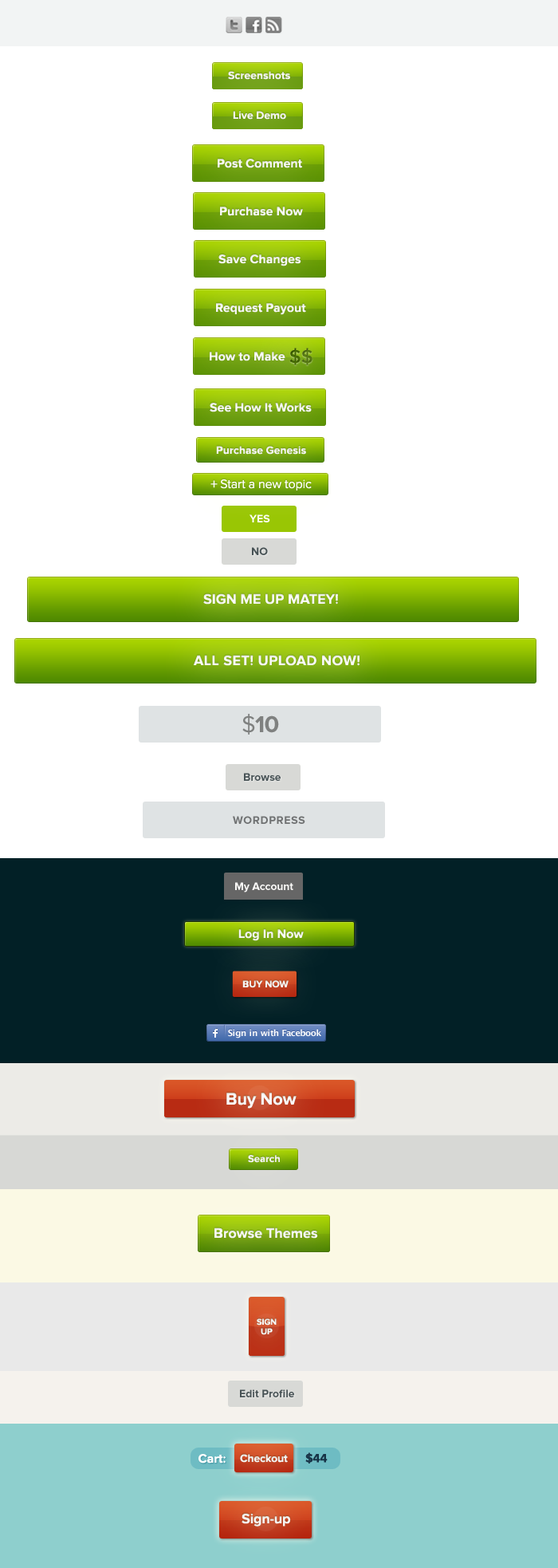
<style>
.page{position:relative;width:558px;height:1568px;background:#ffffff}
.page>*{position:absolute;margin:0}
.t1{font:11.2px "ProximaNova-Bold";color:#ffffff}
.t2{font:12.8px "ProximaNova-Bold";color:#ffffff}
.t3{font:19.1px "ProximaNova-Semibold";color:#446902}
.t4{font:19.1px "ProximaNova-Semibold";color:#547612}
.t5{font:11.2px "ProximaNova-Bold";color:#475255}
.t6{font:14.4px "ProximaNova-Bold";color:#ffffff}
.t7{font:14.4px "ProximaNova-Bold";letter-spacing:0.025em;color:#ffffff}
.t8{font:23.9px "ProximaNova-Bold";letter-spacing:-0.025em;color:#7f8180}
.t9{font:23.9px "ProximaNova-Regular";letter-spacing:-0.025em;color:#7f8180}
.t10{font:11.2px "ProximaNova-Bold";letter-spacing:0.05em;color:#6f7172}
.t11{font:11.2px "ProximaNova-Bold";letter-spacing:-0.01em;color:#fcfbf9}
.t12{font:9.9px "ProximaNova-Bold";letter-spacing:-0.01em;color:#ffffff}
.t13{font:17.5px "ProximaNova-Bold";letter-spacing:-0.01em;color:#ffffff}
.t14{font:10.4px "ProximaNova-Bold";color:#ffffff}
.t15{font:8.8px "ProximaNova-Bold";letter-spacing:-0.01em;color:#ffffff}
.t16{font:11.2px "ProximaNova-Bold";letter-spacing:-0.01em;color:#ffffff}
.t17{font:12.2px "ProximaNova-Bold";letter-spacing:-0.01em;color:#173347}
.t18{font:14.4px "ProximaNova-Bold";letter-spacing:-0.01em;color:#ffffff}
</style>
<div class="page">
<p class="t1" style="left:228px;top:71px;width:62px;height:9px">Screenshots</p>
<p class="t1" style="left:233px;top:111px;width:53px;height:9px">Live Demo</p>
<p class="t2" style="left:218px;top:159px;width:84px;height:9px">Post Comment</p>
<p class="t2" style="left:220px;top:207px;width:83px;height:9px">Purchase Now</p>
<p class="t2" style="left:219px;top:254px;width:82px;height:12px">Save Changes</p>
<p class="t2" style="left:216px;top:303px;width:90px;height:12px">Request Payout</p>
<p class="t2" style="left:210px;top:352px;width:76px;height:9px">How to Make</p>
<p class="t3" style="left:290px;top:348px;width:11px;height:17px">$</p>
<p class="t4" style="left:301px;top:348px;width:12px;height:17px">$</p>
<p class="t2" style="left:210px;top:403px;width:102px;height:9px">See How It Works</p>
<p class="t1" style="left:216px;top:446px;width:90px;height:9px">Purchase Genesis</p>
<p class="t1" style="left:250px;top:514px;width:20px;height:8px">YES</p>
<p class="t5" style="left:252px;top:547px;width:16px;height:8px">NO</p>
<p class="t6" style="left:203px;top:593px;width:135px;height:12px">SIGN ME UP MATEY!</p>
<p class="t7" style="left:193px;top:655px;width:167px;height:11px">ALL SET! UPLOAD NOW!</p>
<p class="t8" style="left:242px;top:714px;width:37px;height:21px"><span class="t9">$</span>10</p>
<p class="t5" style="left:244px;top:773px;width:37px;height:8px">Browse</p>
<p class="t10" style="left:233px;top:816px;width:72px;height:8px">WORDPRESS</p>
<p class="t11" style="left:235px;top:882px;width:59px;height:10px">My Account</p>
<p class="t2" style="left:238px;top:929px;width:66px;height:12px">Log In Now</p>
<p class="t12" style="left:242px;top:980px;width:47px;height:8px">BUY NOW</p>
<p class="t13" style="left:227px;top:1093px;width:70px;height:16px">Buy Now</p>
<p class="t14" style="left:248px;top:1155px;width:32px;height:8px">Search</p>
<p class="t6" style="left:215px;top:1227px;width:103px;height:12px">Browse Themes</p>
<p class="t15" style="left:257px;top:1318px;width:20px;height:8px">SIGN</p>
<p class="t15" style="left:261px;top:1328px;width:12px;height:7px">UP</p>
<p class="t5" style="left:240px;top:1389px;width:54px;height:8px">Edit Profile</p>
<p class="t2" style="left:199px;top:1454px;width:27px;height:10px">Cart:</p>
<p class="t16" style="left:240px;top:1454px;width:48px;height:9px">Checkout</p>
<p class="t17" style="left:305px;top:1452px;width:23px;height:12px">$44</p>
<p class="t18" style="left:242px;top:1513px;width:49px;height:14px">Sign-up</p>
</div>
